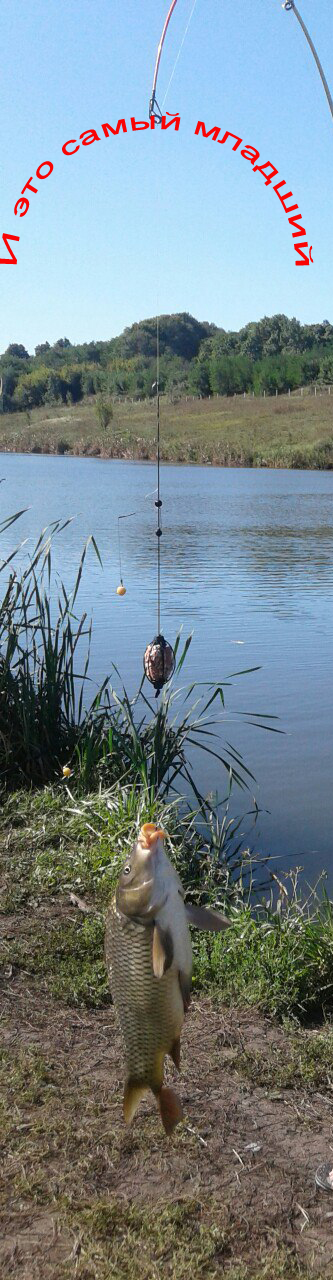
<style>
.page{position:relative;width:333px;height:1280px}
.page>*{position:absolute;margin:0}
.t1{font:24px "ArialMT";color:#f80404}
</style>
<div class="page">
<p class="t1" style="left:0px;top:112px;width:314px;height:154px;text-align:center">И это самый младший</p>
</div>
